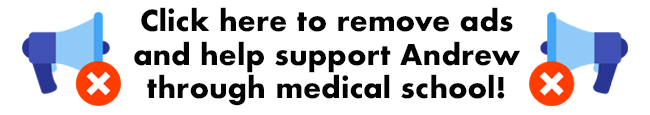
<style>
.page{position:relative;width:650px;height:115px;background:#ffffff}
.page>*{position:absolute;margin:0}
.t1{font:28px "Futura-Bold";color:#030303}
</style>
<div class="page">
<p class="t1" style="left:134px;top:7px;width:386px;height:99px;text-align:center">Click here to remove ads <br>and help support Andrew<br>through medical school!</p>
</div>
